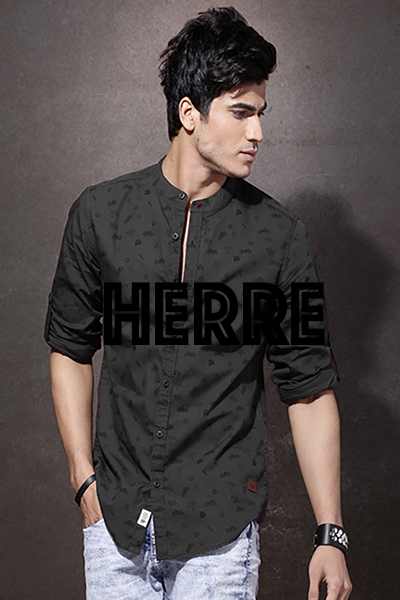
<style>
.page{position:relative;width:400px;height:600px}
.page>*{position:absolute;margin:0}
.t1{font:94.3px "Phosphate-Inline";color:#000000;scale:0.89 1}
</style>
<div class="page">
<p class="t1" style="left:104px;top:282px;width:221px;height:63px">HERRE</p>
</div>
